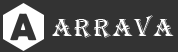
<style>
.page{position:relative;width:178px;height:52px;background:#333333}
.page>*{position:absolute;margin:0}
.t1{font:26px "Algerian";letter-spacing:0.1em;color:#ffffff}
</style>
<div class="page">
<p class="t1" style="left:52px;top:15px;width:122px;height:23px">ARRAVA</p>
</div>
